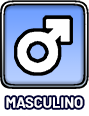
<style>
.page{position:relative;width:89px;height:116px;background:#ffffff}
.page>*{position:absolute;margin:0}
.t1{font:14.7px "Barlow-Bold";color:#ffffff}
</style>
<div class="page">
<p class="t1" style="left:6px;top:97px;width:77px;height:11px">MASCULINO</p>
</div>
